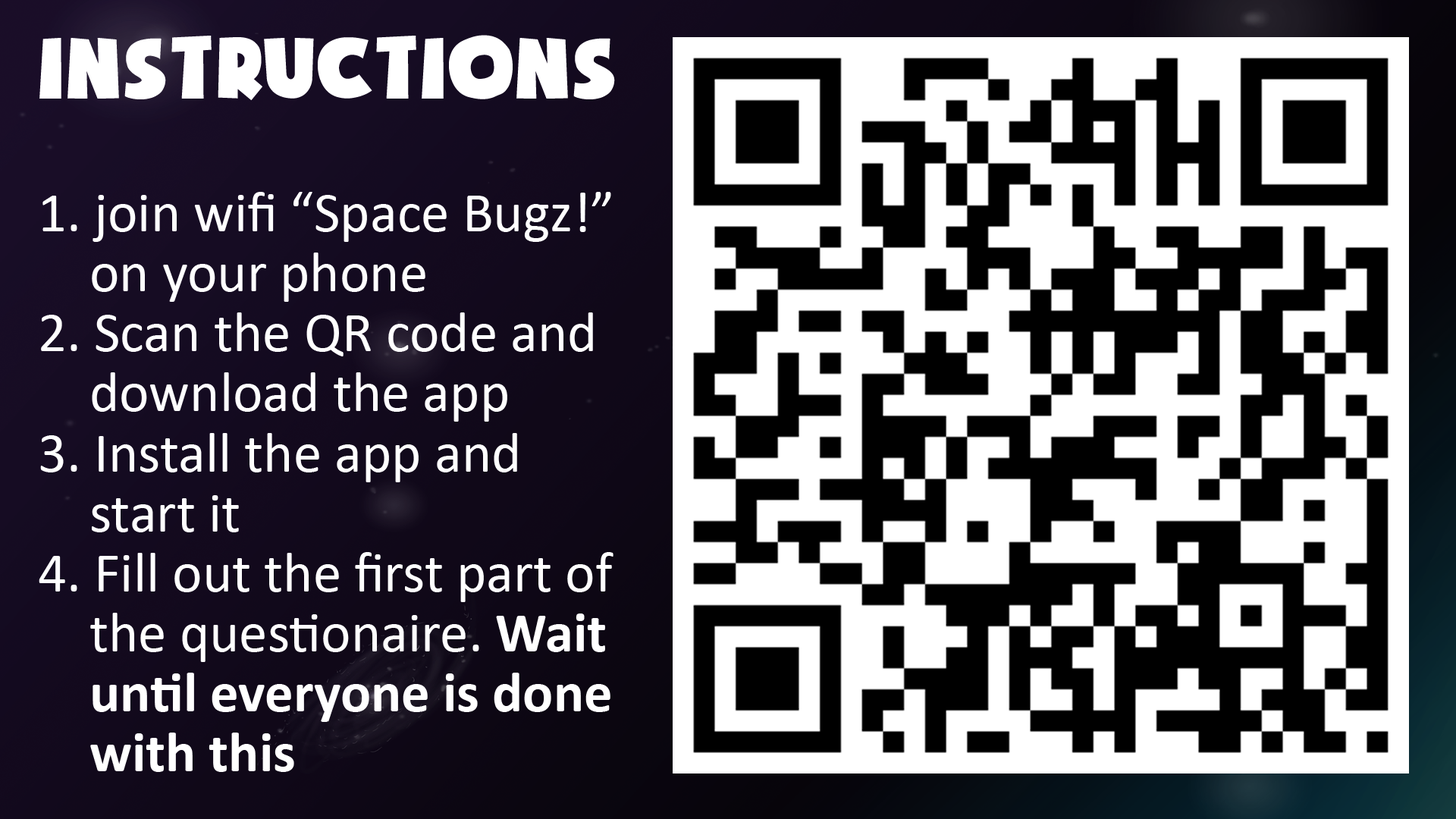
<style>
.page{position:relative;width:1456px;height:819px;background:#ffffff}
.page>*{position:absolute;margin:0}
.t1{font:98px "SoupofJustice";color:#ffffff}
.t2{font:56.9px/60px "Calibri";color:#ffffff}
.t3{font:56.9px/60px "Calibri-Bold";color:#ffffff}
</style>
<div class="page">
<p class="t1" style="left:39px;top:35px;width:576px;height:65px">Instructions</p>
<p class="t2" style="left:39px;top:192px;width:574px;height:580px">1. join wifi “Space Bugz!”<br>    on your phone<br>2. Scan the QR code and<br>    download the app<br>3. Install the app and<br>    start it<br>4. Fill out the first part of <br>    the questionaire. <span class="t3">Wait <br>    until everyone is done<br>    with this</span></p>
</div>
